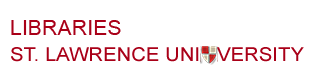
<style>
.page{position:relative;width:320px;height:77px;background:#ffffff}
.page>*{position:absolute;margin:0}
.t1{font:20.2px "ArialMT";color:#a90018;scale:1.06 1}
.t2{font:19.2px "ArialMT";color:#a90018;scale:1.06 1}
</style>
<div class="page">
<p class="t1" style="left:11px;top:20px;width:110px;height:15px">LIBRARIES</p>
<p class="t2" style="left:11px;top:47px;width:293px;height:15px">ST. LAWRENCE UNI   VERSITY</p>
</div>
